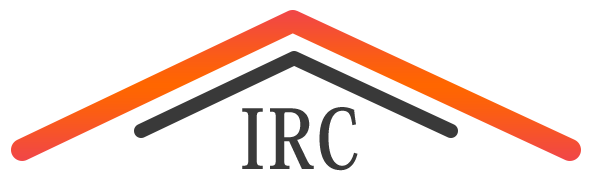
<style>
.page{position:relative;width:592px;height:179px;background:#ffffff}
.page>*{position:absolute;margin:0}
.t1{font:81.6px "KozMinPr6N-Bold";letter-spacing:0.04em;color:#393939;scale:0.86 1}
</style>
<div class="page">
<p class="t1" style="left:242px;top:107px;width:116px;height:64px">IRC</p>
</div>
